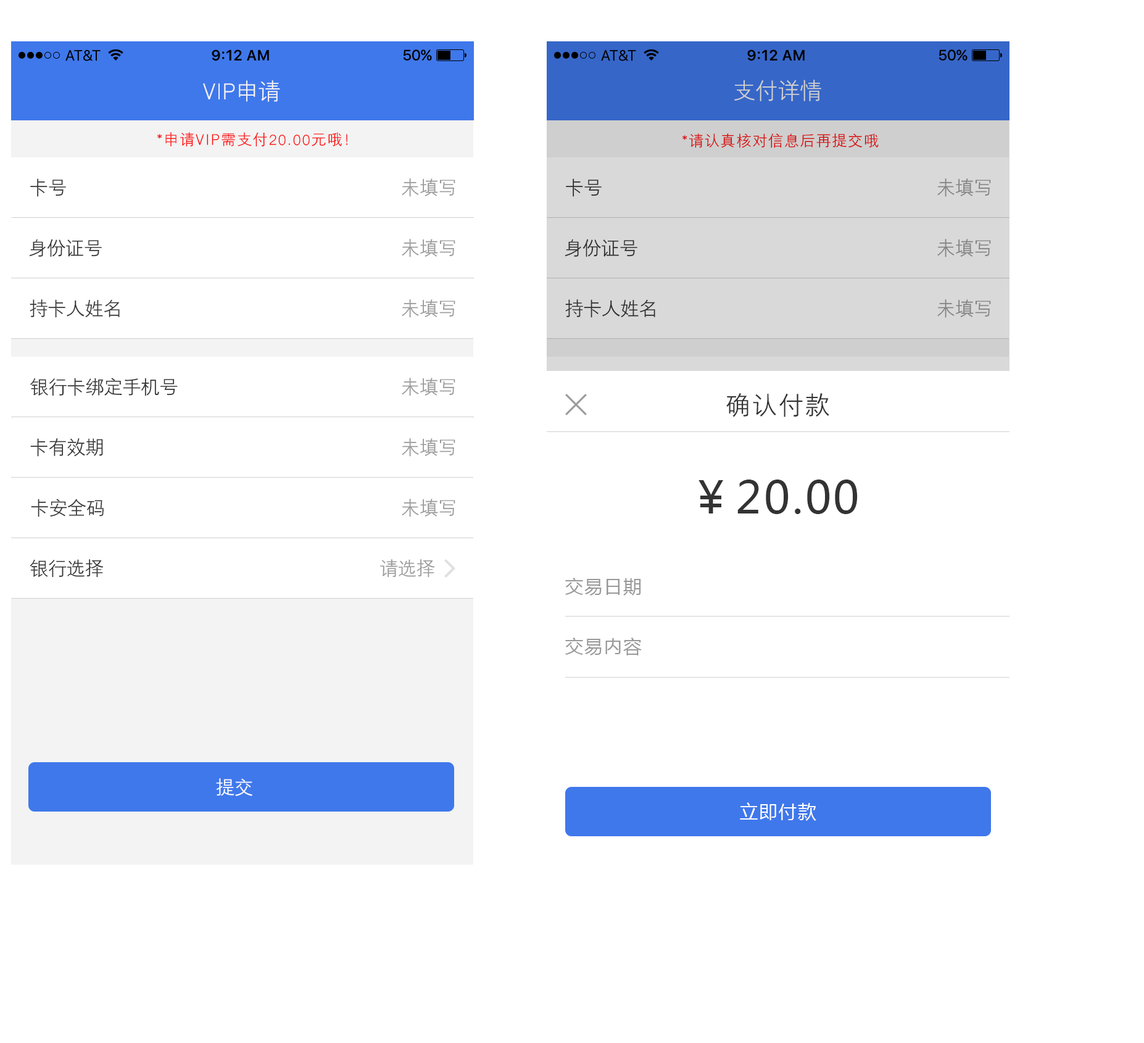
<style>
.page{position:relative;width:1144px;height:1043px;background:#ffffff}
.page>*{position:absolute;margin:0}
.t1{font:22.2px "HYZhongJianHeiJ";color:#f3f3f3}
.t2{font:14.8px "HYZhongJianHeiJ";letter-spacing:0.075em;color:#ff0000}
.t3{font:18.5px "HYZhongJianHeiJ";color:#333333}
.t4{font:18.5px "HYZhongJianHeiJ";color:#999999}
.t5{font:24.7px "HYZhongJianHeiJ";letter-spacing:0.075em;color:#333333}
.t6{font:44.4px "MicrosoftYaHei";letter-spacing:0.05em;color:#333333}
.t7{font:18.5px "MicrosoftYaHei";letter-spacing:0.05em;color:#999999}
.t8{font:18.5px "HYZhongJianHeiJ";color:#ffffff}
.t9{font:18.5px "MicrosoftYaHei";letter-spacing:0.05em;color:#ffffff}
</style>
<div class="page">
<p class="t1" style="left:203px;top:80px;width:77px;height:22px">VIP申请</p>
<p class="t2" style="left:157px;top:132px;width:191px;height:15px">*申请VIP需支付20.00元哦！</p>
<p class="t3" style="left:30px;top:178px;width:36px;height:19px">卡号</p>
<p class="t4" style="left:402px;top:178px;width:53px;height:19px">未填写</p>
<p class="t3" style="left:29px;top:239px;width:73px;height:18px">身份证号</p>
<p class="t4" style="left:402px;top:239px;width:53px;height:18px">未填写</p>
<p class="t3" style="left:30px;top:299px;width:90px;height:19px">持卡人姓名</p>
<p class="t4" style="left:402px;top:299px;width:53px;height:19px">未填写</p>
<p class="t3" style="left:30px;top:378px;width:148px;height:18px">银行卡绑定手机号</p>
<p class="t4" style="left:402px;top:378px;width:53px;height:18px">未填写</p>
<p class="t5" style="left:726px;top:393px;width:103px;height:24px">确认付款</p>
<p class="t3" style="left:30px;top:438px;width:73px;height:19px">卡有效期</p>
<p class="t4" style="left:402px;top:438px;width:53px;height:19px">未填写</p>
<p class="t6" style="left:698px;top:479px;width:159px;height:35px">￥20.00</p>
<p class="t3" style="left:31px;top:498px;width:73px;height:19px">卡安全码</p>
<p class="t4" style="left:402px;top:498px;width:53px;height:19px">未填写</p>
<p class="t3" style="left:30px;top:559px;width:73px;height:18px">银行选择</p>
<p class="t4" style="left:380px;top:559px;width:54px;height:18px">请选择</p>
<p class="t7" style="left:565px;top:577px;width:76px;height:18px">交易日期</p>
<p class="t7" style="left:565px;top:637px;width:77px;height:18px">交易内容</p>
<p class="t8" style="left:216px;top:778px;width:36px;height:18px">提交</p>
<p class="t9" style="left:740px;top:802px;width:76px;height:18px">立即付款</p>
</div>
